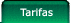
<style>
.page{position:relative;width:71px;height:23px}
.page>*{position:absolute;margin:0}
.t1{font:10px "Verdana";color:#ffffff}
</style>
<div class="page">
<p class="t1" style="left:20px;top:8px;width:33px;height:9px">Tarifas</p>
</div>
